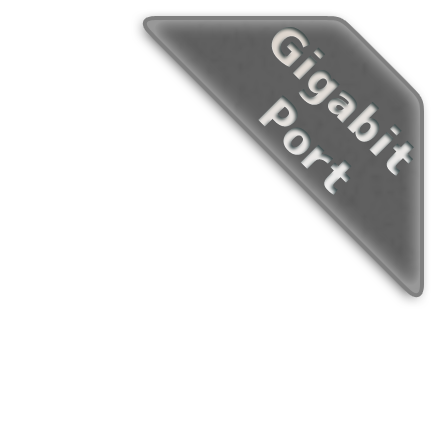
<style>
.page{position:relative;width:440px;height:440px;background:#ffffff}
.page>*{position:absolute;margin:0}
.t1{font:48px "mplus-1p-black"}
</style>
<div class="page">
<p class="t1" style="left:258px;top:27px;width:156px;height:168px;text-align:center;rotate:45deg">Gigabit <br>Port</p>
</div>
